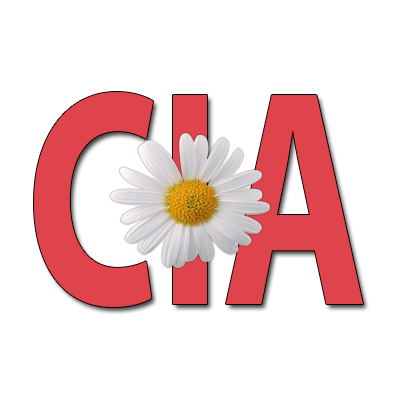
<style>
.page{position:relative;width:400px;height:400px;background:#ffffff}
.page>*{position:absolute;margin:0}
.t1{font:310px "MyriadPro-Bold";color:#df444c;scale:0.72 1}
</style>
<div class="page">
<p class="t1" style="left:34px;top:92px;width:329px;height:215px">CIA</p>
</div>
